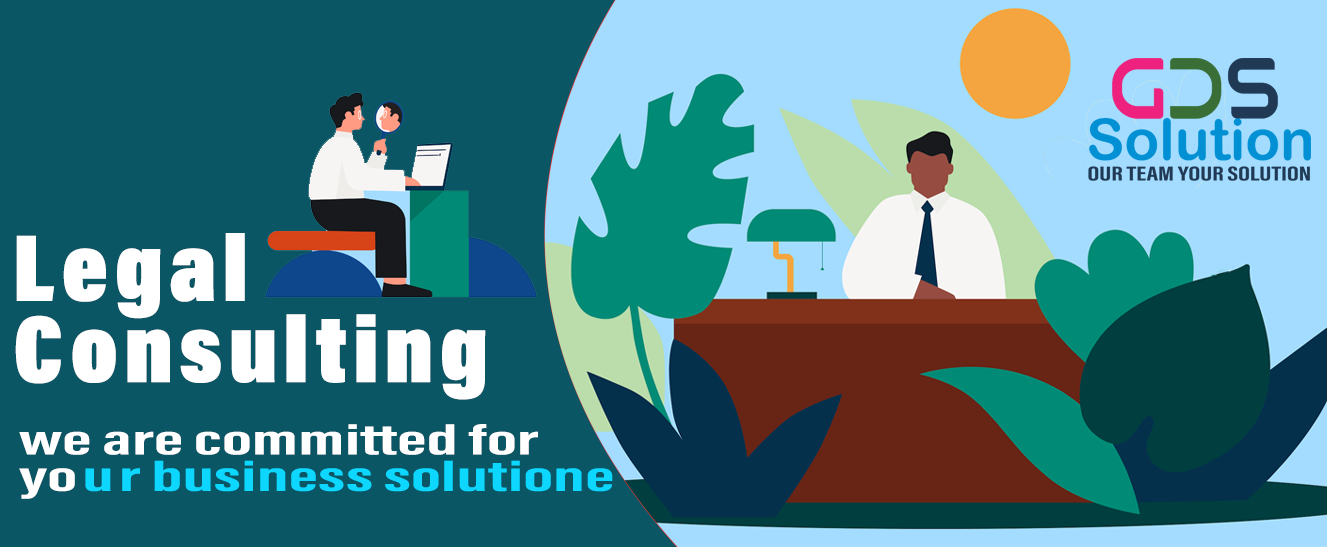
<style>
.page{position:relative;width:1327px;height:547px;background:#0a5665}
.page>*{position:absolute;margin:0}
.t1{font:96.7px/81.3px "AcuminConcept-CondensedUltraBlack";letter-spacing:0.06em;color:#ffffff;font-style:italic}
.t2{font:43.5px/10.9px "AcuminConcept-ExtraCondensedBold";color:#ffffff;font-style:italic;scale:1.9 1}
.t3{font:43.5px/36.6px "AcuminConcept-ExtraCondensedBold";color:#ffffff;font-style:italic;scale:1.9 1}
.t4{font:43.5px/36.6px "AcuminConcept-ExtraCondensedBold";letter-spacing:0.06em;color:#ffffff;font-style:italic;scale:1.9 1}
.t5{font:43.5px/36.6px "AcuminConcept-ExtraCondensedBold";letter-spacing:0.06em;color:#0dd7ff;font-style:italic;scale:1.9 1}
.t6{font:43.5px/36.6px "AcuminConcept-ExtraCondensedBold";color:#0dd7ff;font-style:italic;scale:1.9 1}
</style>
<div class="page">
<p class="t1" style="left:15px;top:233px;width:471px;height:167px">Legal <br>Consulting</p>
<p class="t2" style="left:19px;top:424px;width:594px;height:75px">we are committed for <br><span class="t3">y</span><span class="t4">o</span><span class="t5">u</span><span class="t6">r business solutione</span></p>
</div>
